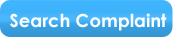
<style>
.page{position:relative;width:173px;height:37px}
.page>*{position:absolute;margin:0}
.t1{font:18px "CenturyGothic-Bold";color:#fdfdfd}
</style>
<div class="page">
<p class="t1" style="left:10px;top:13px;width:157px;height:18px">Search Complaint</p>
</div>
